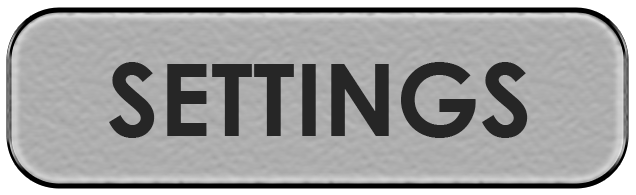
<style>
.page{position:relative;width:636px;height:195px}
.page>*{position:absolute;margin:0}
.t1{font:100px "CenturyGothic-Bold";color:#262626}
</style>
<div class="page">
<p class="t1" style="left:109px;top:62px;width:419px;height:76px">SETTINGS</p>
</div>
